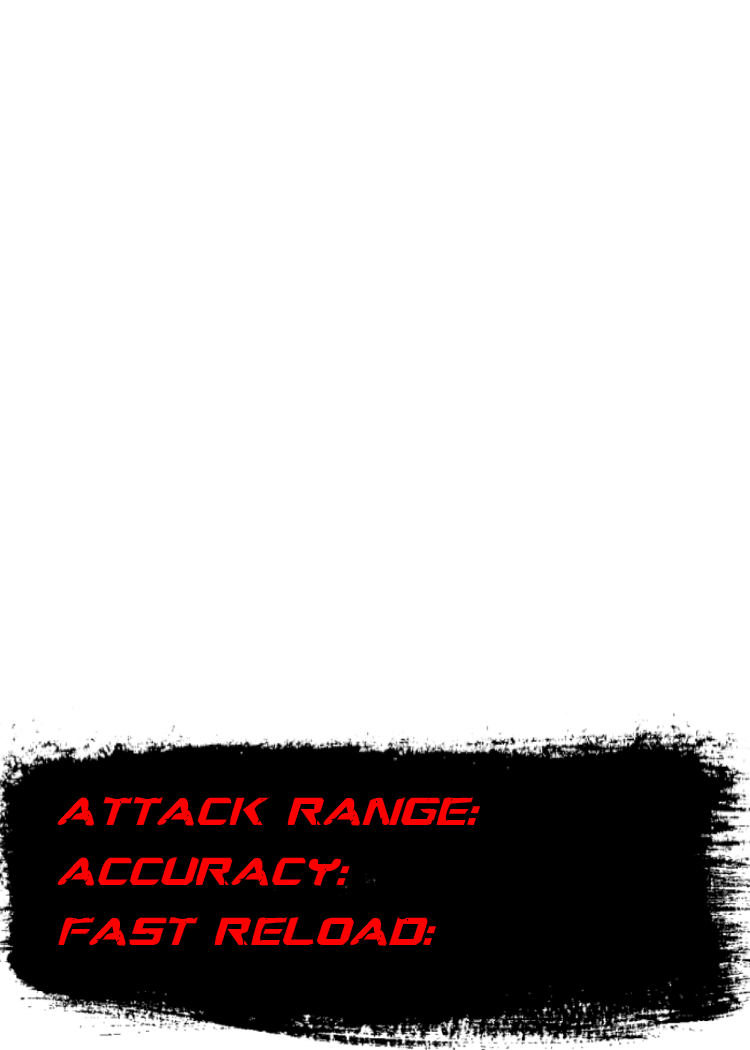
<style>
.page{position:relative;width:750px;height:1050px;background:#ffffff}
.page>*{position:absolute;margin:0}
.t1{font:50px "WarEagleBoldItalic";color:#ff0000}
</style>
<div class="page">
<p class="t1" style="left:57px;top:797px;width:423px;height:149px">Attack Range:<br>Accuracy:<br>Fast Reload:</p>
</div>
